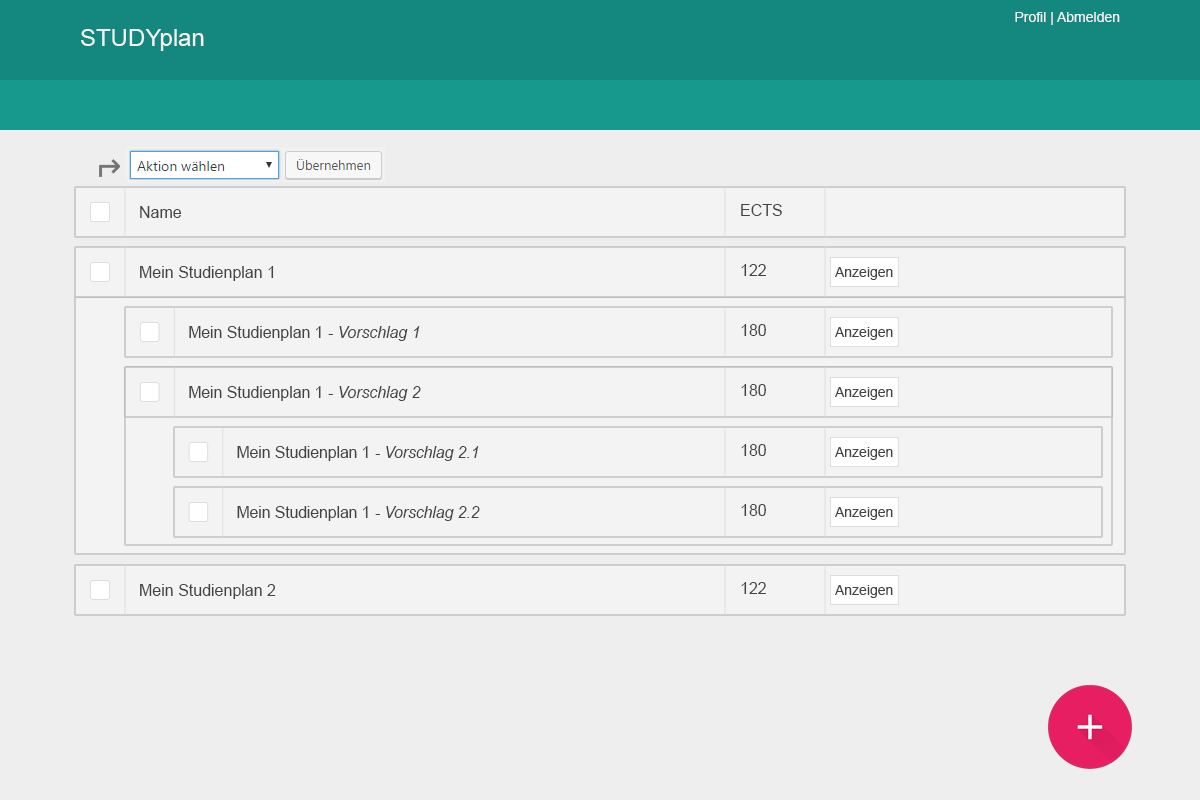
<style>
.page{position:relative;width:1200px;height:800px;background:#eeeeee}
.page>*{position:absolute;margin:0}
.t1{font:14px "ArialMT";color:#f3f3f3}
.t2{font:24px "ArialMT";color:#f3f3f3}
.t3{font:16px "ArialMT";color:#444444}
.t4{font:14px "ArialMT";color:#444444}
.t5{font:16px "Arial-ItalicMT";color:#444444}
</style>
<div class="page">
<p class="t1" style="left:1015px;top:12px;width:105px;height:13px">Profil | Abmelden</p>
<p class="t2" style="left:81px;top:29px;width:123px;height:22px">STUDYplan</p>
<p class="t3" style="left:140px;top:206px;width:42px;height:12px">Name</p>
<p class="t3" style="left:741px;top:204px;width:41px;height:12px">ECTS</p>
<p class="t3" style="left:140px;top:266px;width:134px;height:15px">Mein Studienplan 1</p>
<p class="t3" style="left:741px;top:264px;width:25px;height:12px">122</p>
<p class="t4" style="left:835px;top:267px;width:58px;height:13px">Anzeigen</p>
<p class="t3" style="left:189px;top:326px;width:231px;height:15px">Mein Studienplan 1<span class="t5"> - Vorschlag 1</span></p>
<p class="t3" style="left:741px;top:324px;width:25px;height:12px">180</p>
<p class="t4" style="left:835px;top:327px;width:58px;height:13px">Anzeigen</p>
<p class="t3" style="left:189px;top:386px;width:232px;height:15px">Mein Studienplan 1<span class="t5"> - Vorschlag 2</span></p>
<p class="t3" style="left:741px;top:384px;width:25px;height:12px">180</p>
<p class="t4" style="left:835px;top:387px;width:58px;height:13px">Anzeigen</p>
<p class="t3" style="left:237px;top:446px;width:242px;height:15px">Mein Studienplan 1<span class="t5"> - Vorschlag 2.1</span></p>
<p class="t3" style="left:741px;top:444px;width:25px;height:12px">180</p>
<p class="t4" style="left:835px;top:447px;width:58px;height:13px">Anzeigen</p>
<p class="t3" style="left:237px;top:506px;width:243px;height:15px">Mein Studienplan 1<span class="t5"> - Vorschlag 2.2</span></p>
<p class="t3" style="left:741px;top:504px;width:25px;height:12px">180</p>
<p class="t4" style="left:835px;top:507px;width:58px;height:13px">Anzeigen</p>
<p class="t3" style="left:741px;top:582px;width:25px;height:12px">122</p>
<p class="t3" style="left:140px;top:584px;width:136px;height:15px">Mein Studienplan 2</p>
<p class="t4" style="left:835px;top:585px;width:58px;height:13px">Anzeigen</p>
</div>
